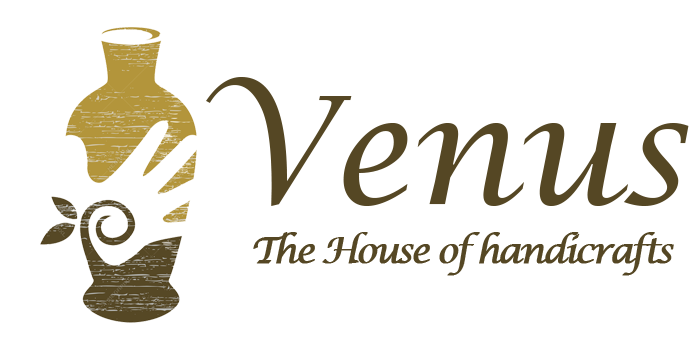
<style>
.page{position:relative;width:700px;height:350px;background:#ffffff}
.page>*{position:absolute;margin:0}
.t1{font:148.6px "LucidaCalligraphy-Italic";color:#554724}
.t2{font:36.1px "LucidaCalligraphy-Italic";letter-spacing:-0.1em;color:#554724;font-weight:bold}
</style>
<div class="page">
<p class="t1" style="left:206px;top:77px;width:483px;height:129px">Venus</p>
<p class="t2" style="left:253px;top:232px;width:421px;height:44px">The House of handicrafts</p>
</div>
